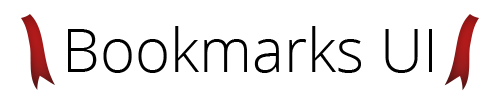
<style>
.page{position:relative;width:500px;height:100px;background:#ffffff}
.page>*{position:absolute;margin:0}
.t1{font:60px "OpenSans-Light";color:#000000}
</style>
<div class="page">
<p class="t1" style="left:68px;top:26px;width:364px;height:47px">Bookmarks UI</p>
</div>
